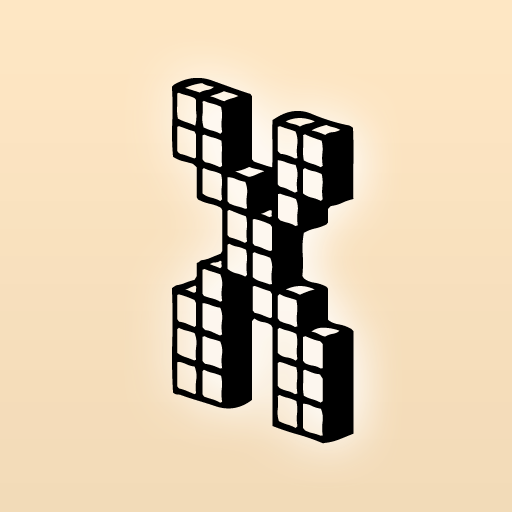
<style>
.page{position:relative;width:512px;height:512px}
.page>*{position:absolute;margin:0}
.t1{font:384px "Blox-BRK";color:#000000}
</style>
<div class="page">
<p class="t1" style="left:172px;top:78px;width:182px;height:366px">X</p>
</div>
